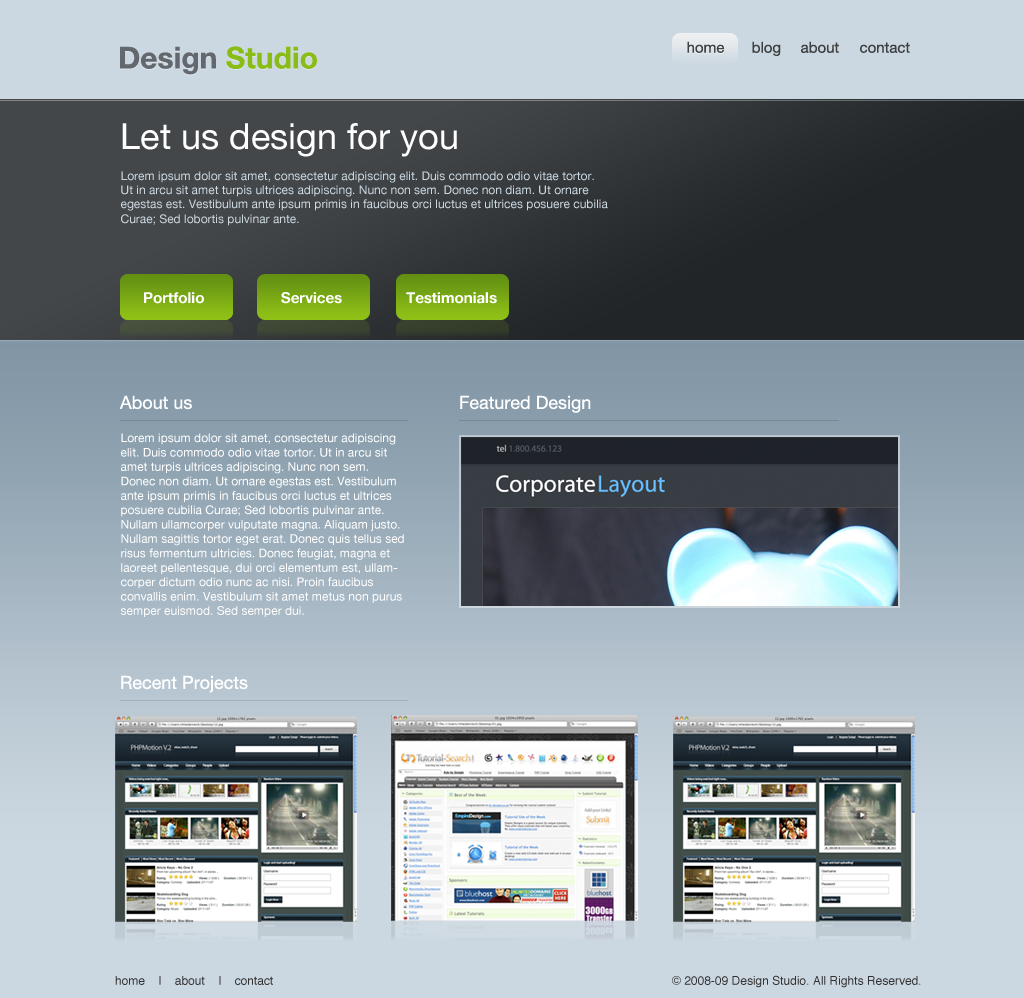
<style>
.page{position:relative;width:1024px;height:998px}
.page>*{position:absolute;margin:0}
.t1{font:15px "HelveticaNeue";color:#3e4041}
.t2{font:30px "HelveticaNeue-Bold";color:#62686d}
.t3{font:30px "HelveticaNeue-Bold";color:#8abc16}
.t4{font:36px "HelveticaNeue";color:#ffffff}
.t5{font:12px "HelveticaNeue";color:#ccd8e1}
.t6{font:15px "HelveticaNeue-Bold";color:#ffffff}
.t7{font:18px "HelveticaNeue";color:#ffffff}
.t8{font:12px "HelveticaNeue";color:#ffffff}
.t9{font:12px "Helvetica";color:#323232}
</style>
<div class="page">
<p class="t1" style="left:687px;top:41px;width:38px;height:12px">home</p>
<p class="t1" style="left:752px;top:41px;width:29px;height:15px">blog</p>
<p class="t1" style="left:801px;top:41px;width:38px;height:12px">about</p>
<p class="t2" style="left:120px;top:46px;width:197px;height:29px">Design <span class="t3">Studio</span></p>
<p class="t1" style="left:860px;top:42px;width:50px;height:11px">contact</p>
<p class="t4" style="left:122px;top:123px;width:335px;height:34px">Let us design for you</p>
<p class="t5" style="left:121px;top:171px;width:487px;height:55px">Lorem ipsum dolor sit amet, consectetur adipiscing elit. Duis commodo odio vitae tortor. Ut in arcu sit amet turpis ultrices adipiscing. Nunc non sem. Donec non diam. Ut ornare egestas est. Vestibulum ante ipsum primis in faucibus orci luctus et ultrices posuere cubilia Curae; Sed lobortis pulvinar ante.</p>
<p class="t6" style="left:144px;top:292px;width:60px;height:12px">Portfolio</p>
<p class="t6" style="left:281px;top:292px;width:61px;height:12px">Services</p>
<p class="t6" style="left:406px;top:292px;width:91px;height:12px">Testimonials</p>
<p class="t7" style="left:119px;top:395px;width:73px;height:15px">About us</p>
<p class="t7" style="left:460px;top:395px;width:131px;height:18px">Featured Design</p>
<p class="t8" style="left:121px;top:433px;width:283px;height:184px">Lorem ipsum dolor sit amet, consectetur adipiscing elit. Duis commodo odio vitae tortor. Ut in arcu sit amet turpis ultrices adipiscing. Nunc non sem. Donec non diam. Ut ornare egestas est. Vestibulum ante ipsum primis in faucibus orci luctus et ultrices posuere cubilia Curae; Sed lobortis pulvinar ante. Nullam ullamcorper vulputate magna. Aliquam justo. Nullam sagittis tortor eget erat. Donec quis tellus sed risus fermentum ultricies. Donec feugiat, magna et laoreet pellentesque, dui orci elementum est, ullamcorper dictum odio nunc ac nisi. Proin faucibus convallis enim. Vestibulum sit amet metus non purus semper euismod. Sed semper dui.</p>
<p class="t7" style="left:121px;top:675px;width:127px;height:18px">Recent Projects</p>
<p class="t9" style="left:115px;top:976px;width:158px;height:9px">home    |    about    |    contact</p>
<p class="t9" style="left:672px;top:975px;width:249px;height:13px">© 2008-09 Design Studio. All Rights Reserved.</p>
</div>
